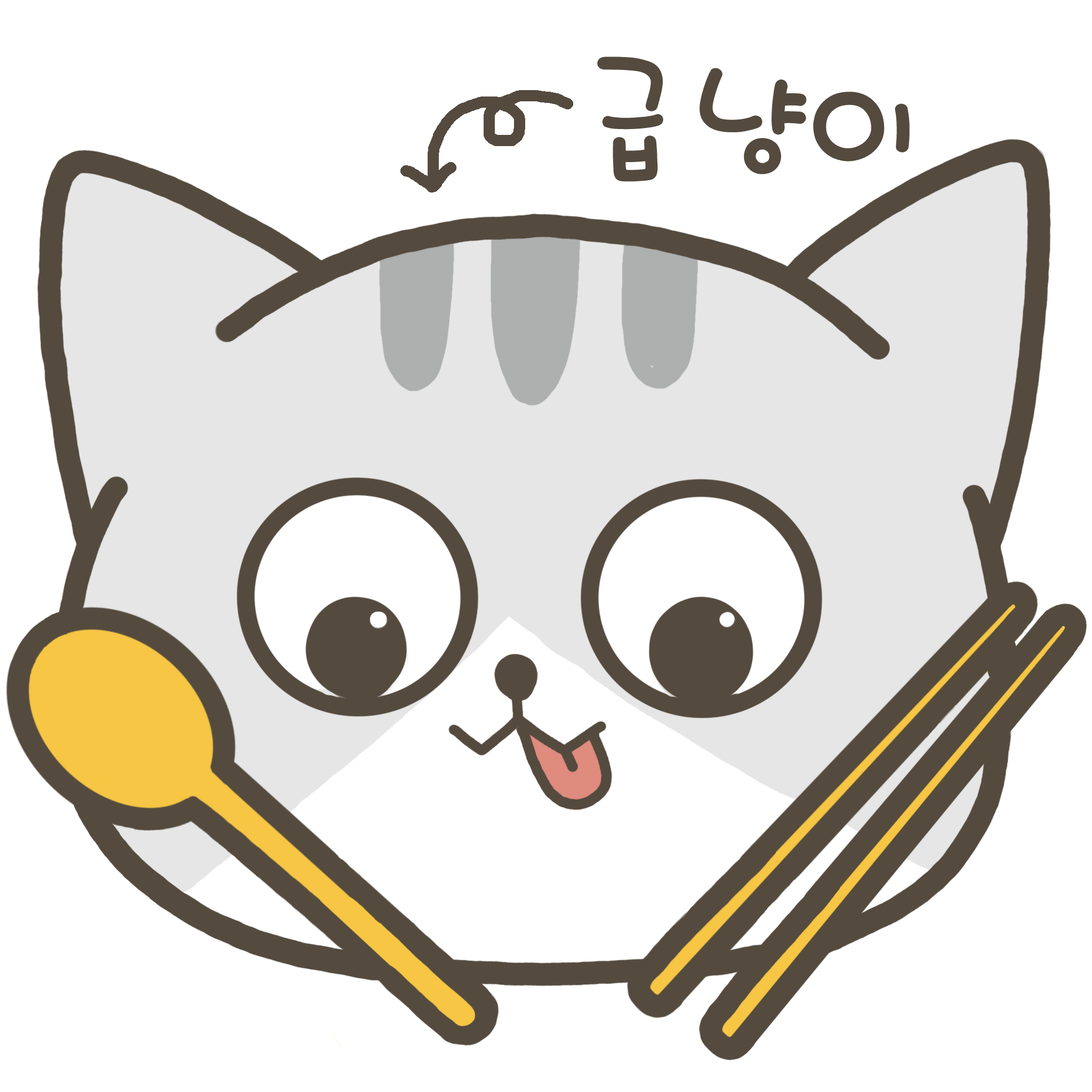
<style>
.page{position:relative;width:1092px;height:1092px;background:#ffffff}
.page>*{position:absolute;margin:0}
.t1{font:146.6px "RixCatfarmM";color:#544a3e}
</style>
<div class="page">
<p class="t1" style="left:599px;top:58px;width:309px;height:122px">급냥이</p>
</div>
